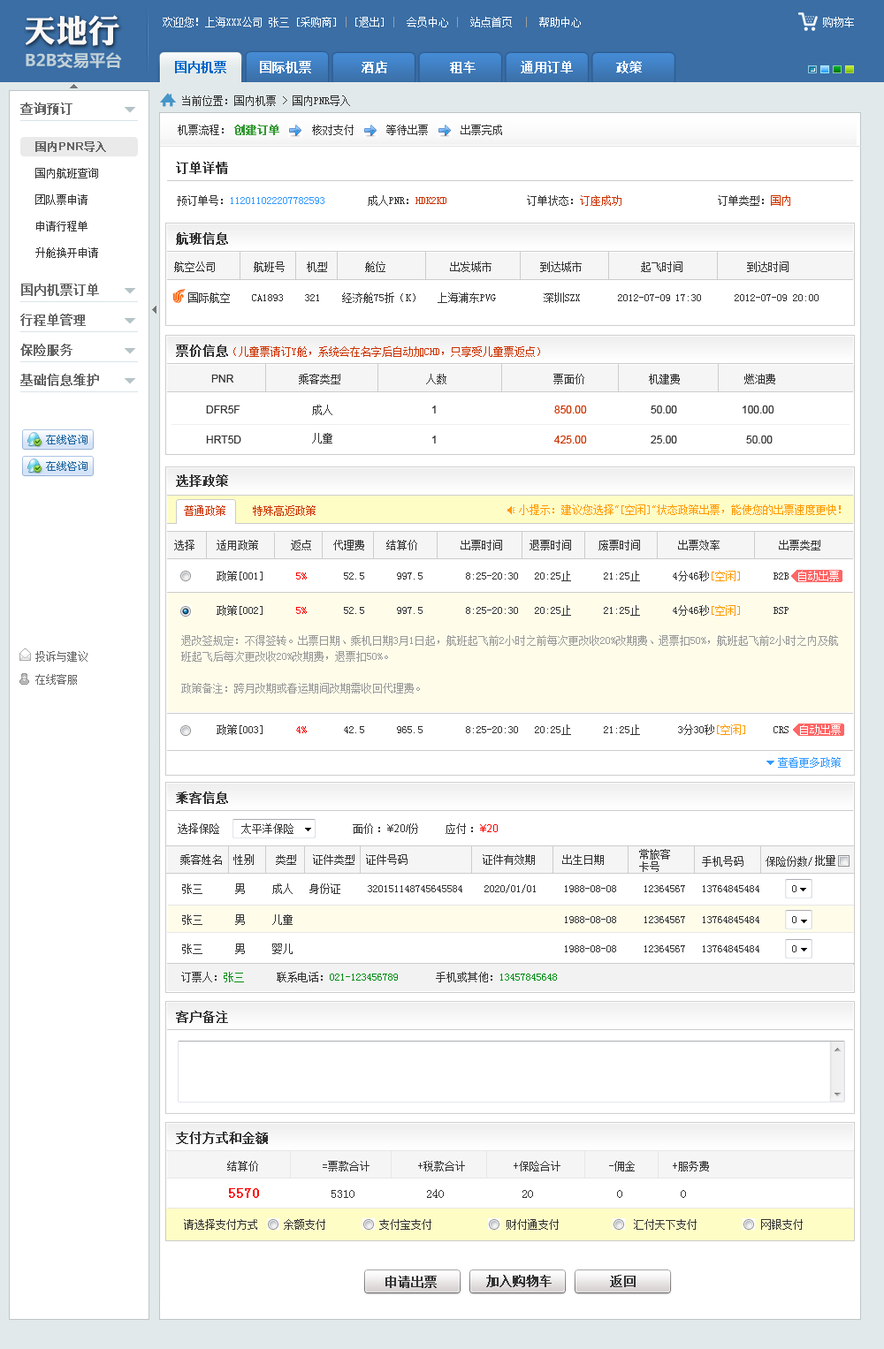
<style>
.page{position:relative;width:884px;height:1349px;background:#ffffff}
.page>*{position:absolute;margin:0}
.t1{font:32px "DFPLiJinHeiW8";color:#faf7f7}
.t2{font:10.6px "SimSun";color:#ffffff}
.t3{font:10.6px "SimSun";color:#9e9e9e}
.t4{font:16.2px "MicrosoftYaHei-Bold";color:#c2d1d8}
.t5{font:12.4px "SimSun";color:#ffffff;font-weight:bold}
.t6{font:12.4px "SimSun";color:#0066cc;font-weight:bold}
.t7{font:10.6px "SimSun";color:#333333}
.t8{font:12.4px "SimSun";color:#666666;font-weight:bold}
.t9{font:10.6px "SimSun";color:#339933;font-weight:bold}
.t10{font:10.6px "ArialMT";color:#666666;font-weight:bold}
.t11{font:10.6px "SimSun";color:#666666;font-weight:bold}
.t12{font:12.4px "SimSun";color:#333333;font-weight:bold}
.t13{font:10.6px/26.5px "SimSun";color:#333333}
.t14{font:10.6px "SimSun";color:#3399ff}
.t15{font:10.6px "SimSun";color:#cc3300}
.t16{font:10.6px "ArialMT";color:#333333}
.t17{font:10.6px/28.3px "SimSun";color:#333333}
.t18{font:10.6px "ArialMT";color:#cc3300}
.t19{font:10.6px "SimSun";color:#ff9900}
.t20{font:10.6px "SimSun";color:#ff0000}
.t21{font:10.6px/15.9px "SimSun";color:#999999}
.t22{font:10.6px/23px "SimSun";color:#666666}
.t23{font:10.6px "ArialMT";color:#ff0000}
.t24{font:10.6px/12.4px "SimSun";color:#333333}
.t25{font:10.6px "SimSun";color:#028d16}
.t26{font:14.1px "SimSun";color:#ff0000;font-weight:bold}
.t27{font:12.4px "SimSun";color:#333333}
</style>
<div class="page">
<p class="t1" style="left:25px;top:15px;width:94px;height:31px">天地行</p>
<p class="t2" style="left:163px;top:17px;width:418px;height:10px">欢迎您！上海XXX公司 张三 [采购商]<span class="t3"> | </span>[退出] <span class="t3">|</span>  会员中心 <span class="t3">|</span>  站点首页  <span class="t3">|</span>  帮助中心</p>
<p class="t2" style="left:823px;top:17px;width:31px;height:10px">购物车</p>
<p class="t4" style="left:26px;top:52px;width:96px;height:17px">B2B交易平台</p>
<p class="t5" style="left:175px;top:61px;width:467px;height:12px"><span class="t6">国内机票</span>    国际机票     酒店     租车     通用订单      政策</p>
<p class="t7" style="left:182px;top:95px;width:168px;height:11px">当前位置：国内机票 &gt; 国内PNR导入</p>
<p class="t8" style="left:20px;top:103px;width:52px;height:12px">查询预订</p>
<p class="t7" style="left:178px;top:125px;width:46px;height:10px">机票流程：</p>
<p class="t7" style="left:234px;top:125px;width:268px;height:10px"><span class="t9">创建订单</span>      核对支付      等待出票      出票完成</p>
<p class="t10" style="left:35px;top:141px;width:71px;height:11px"><span class="t11">国内</span>PNR<span class="t11">导入</span></p>
<p class="t12" style="left:176px;top:162px;width:52px;height:12px">订单详情</p>
<p class="t13" style="left:35px;top:168px;width:63px;height:90px">国内航班查询<br>团队票申请<br>申请行程单<br>升舱换开申请</p>
<p class="t14" style="left:177px;top:195px;width:613px;height:11px"><span class="t7">预订单号：</span>112011022207782593<span class="t7">  成人PNR：</span><span class="t15">HDK2KD</span><span class="t7">   订单状态：</span><span class="t15">订座成功   </span><span class="t7">订单类型：</span><span class="t15">国内</span></p>
<p class="t12" style="left:176px;top:232px;width:52px;height:13px">航班信息</p>
<p class="t7" style="left:174px;top:262px;width:614px;height:10px">航空公司      航班号    机型       舱位            出发城市         到达城市       起飞时间    到达时间</p>
<p class="t8" style="left:21px;top:284px;width:78px;height:12px">国内机票订单</p>
<p class="t7" style="left:188px;top:292px;width:598px;height:11px">国际航空    CA1893    321    经济舱75折（K）   上海浦东PVG         深圳SZX       2012-07-09            2012-07-09</p>
<p class="t7" style="left:676px;top:294px;width:25px;height:7px">17:30</p>
<p class="t7" style="left:793px;top:294px;width:25px;height:7px">20:00</p>
<p class="t8" style="left:20px;top:314px;width:66px;height:12px">行程单管理</p>
<p class="t8" style="left:20px;top:344px;width:52px;height:12px">保险服务</p>
<p class="t12" style="left:176px;top:345px;width:52px;height:12px">票价信息</p>
<p class="t15" style="left:233px;top:346px;width:307px;height:11px">（儿童票请订Y舱，系统会在名字后自动加CHD，只享受儿童票返点）</p>
<p class="t8" style="left:20px;top:374px;width:79px;height:12px">基础信息维护</p>
<p class="t16" style="left:211px;top:375px;width:23px;height:8px">PNR</p>
<p class="t7" style="left:299px;top:374px;width:476px;height:10px">乘客类型   人数    票面价  机建费  燃油费</p>
<p class="t16" style="left:206px;top:406px;width:34px;height:8px">DFR5F</p>
<p class="t17" style="left:312px;top:405px;width:20px;height:39px">成人<br>儿童</p>
<p class="t16" style="left:432px;top:406px;width:4px;height:8px">1</p>
<p class="t18" style="left:554px;top:406px;width:33px;height:8px">850.00</p>
<p class="t16" style="left:650px;top:406px;width:27px;height:8px">50.00</p>
<p class="t16" style="left:742px;top:406px;width:32px;height:8px">100.00</p>
<p class="t16" style="left:206px;top:436px;width:35px;height:8px">HRT5D</p>
<p class="t16" style="left:432px;top:436px;width:4px;height:8px">1</p>
<p class="t18" style="left:554px;top:436px;width:33px;height:8px">425.00</p>
<p class="t16" style="left:650px;top:436px;width:27px;height:8px">25.00</p>
<p class="t16" style="left:746px;top:436px;width:26px;height:8px">50.00</p>
<p class="t12" style="left:176px;top:475px;width:52px;height:12px">选择政策</p>
<p class="t15" style="left:184px;top:505px;width:131px;height:11px">普通政策     特殊高返政策</p>
<p class="t19" style="left:519px;top:505px;width:321px;height:10px">小提示：建议您选择"[空闲]"状态政策出票，能使您的出票速度更快！</p>
<p class="t7" style="left:174px;top:540px;width:646px;height:11px">选择    适用政策      返点    代理费    结算价        出票时间     退票时间     废票时间       出票效率           出票类型</p>
<p class="t7" style="left:217px;top:571px;width:571px;height:10px">政策[001]      <span class="t20">5%</span>       52.5      997.5        8:25-20:30   20:25止      21:25止      4分46秒<span class="t19">[空闲]   </span>   B2B</p>
<p class="t2" style="left:798px;top:571px;width:41px;height:10px">自动出票</p>
<p class="t7" style="left:217px;top:605px;width:571px;height:11px">政策[002]      <span class="t20">5%</span>       52.5      997.5        8:25-20:30   20:25止      21:25止      4分46秒<span class="t19">[空闲]</span>      BSP</p>
<p class="t21" style="left:181px;top:635px;width:657px;height:59px">退改签规定：不得签转。出票日期、乘机日期3月1日起，航班起飞前2小时之前每次更改收20%改期费、退票扣50%，航班起飞前2小时之内及航班起飞后每次更改收20%改期费，退票扣50%。<br><br>政策备注：跨月改期或春运期间改期需收回代理费。</p>
<p class="t22" style="left:35px;top:651px;width:52px;height:34px">投诉与建议 <br>在线客服</p>
<p class="t7" style="left:217px;top:725px;width:571px;height:10px">政策[003]      <span class="t20">4%</span>       42.5      965.5        8:25-20:30   20:25止      21:25止       3分30秒<span class="t19">[空闲]  </span>   CRS</p>
<p class="t2" style="left:800px;top:725px;width:40px;height:10px">自动出票</p>
<p class="t14" style="left:778px;top:757px;width:62px;height:11px">查看更多政策</p>
<p class="t12" style="left:176px;top:792px;width:52px;height:12px">乘客信息</p>
<p class="t7" style="left:178px;top:824px;width:320px;height:10px">选择保险        太平洋保险                      面价 ：<span class="t16">¥20/</span>份          应付 ：<span class="t23">¥20</span></p>
<p class="t7" style="left:180px;top:855px;width:424px;height:10px">乘客姓名  性别    类型   证件类型  证件号码              证件有效期     出生日期</p>
<p class="t24" style="left:639px;top:849px;width:31px;height:23px">常旅客<br>卡号</p>
<p class="t7" style="left:702px;top:856px;width:41px;height:11px">手机号码</p>
<p class="t7" style="left:765px;top:856px;width:47px;height:11px">保险份数/</p>
<p class="t7" style="left:815px;top:855px;width:20px;height:11px">批量</p>
<p class="t7" style="left:182px;top:884px;width:614px;height:10px">张三      男     成人   身份证     320151148745645584    2020/01/01     1988-08-08     12364567   13764845484      0</p>
<p class="t7" style="left:182px;top:915px;width:614px;height:10px">张三      男     儿童           1988-08-08     12364567   13764845484      0</p>
<p class="t7" style="left:182px;top:944px;width:614px;height:10px">张三      男     婴儿           1988-08-08     12364567   13764845484      0</p>
<p class="t25" style="left:181px;top:972px;width:376px;height:11px"><span class="t7">订票人：</span>张三    <span class="t7">联系电话：</span>021-123456789    <span class="t7">手机或其他：</span>13457845648</p>
<p class="t12" style="left:176px;top:1011px;width:52px;height:12px">客户备注</p>
<p class="t12" style="left:176px;top:1132px;width:92px;height:12px">支付方式和金额</p>
<p class="t7" style="left:227px;top:1161px;width:482px;height:11px">结算价       =票款合计      +税款合计     +保险合计     -佣金      +服务费</p>
<p class="t26" style="left:229px;top:1189px;width:30px;height:9px">5570</p>
<p class="t27" style="left:331px;top:1189px;width:355px;height:9px">5310   240     20   0  0</p>
<p class="t7" style="left:184px;top:1219px;width:73px;height:11px">请选择支付方式</p>
<p class="t7" style="left:284px;top:1219px;width:518px;height:11px">余额支付  支付宝支付   财付通支付   汇付天下支付  网银支付</p>
<p class="t12" style="left:385px;top:1276px;width:52px;height:12px">申请出票</p>
<p class="t12" style="left:486px;top:1275px;width:65px;height:13px">加入购物车</p>
<p class="t12" style="left:610px;top:1275px;width:25px;height:13px">返回</p>
</div>
